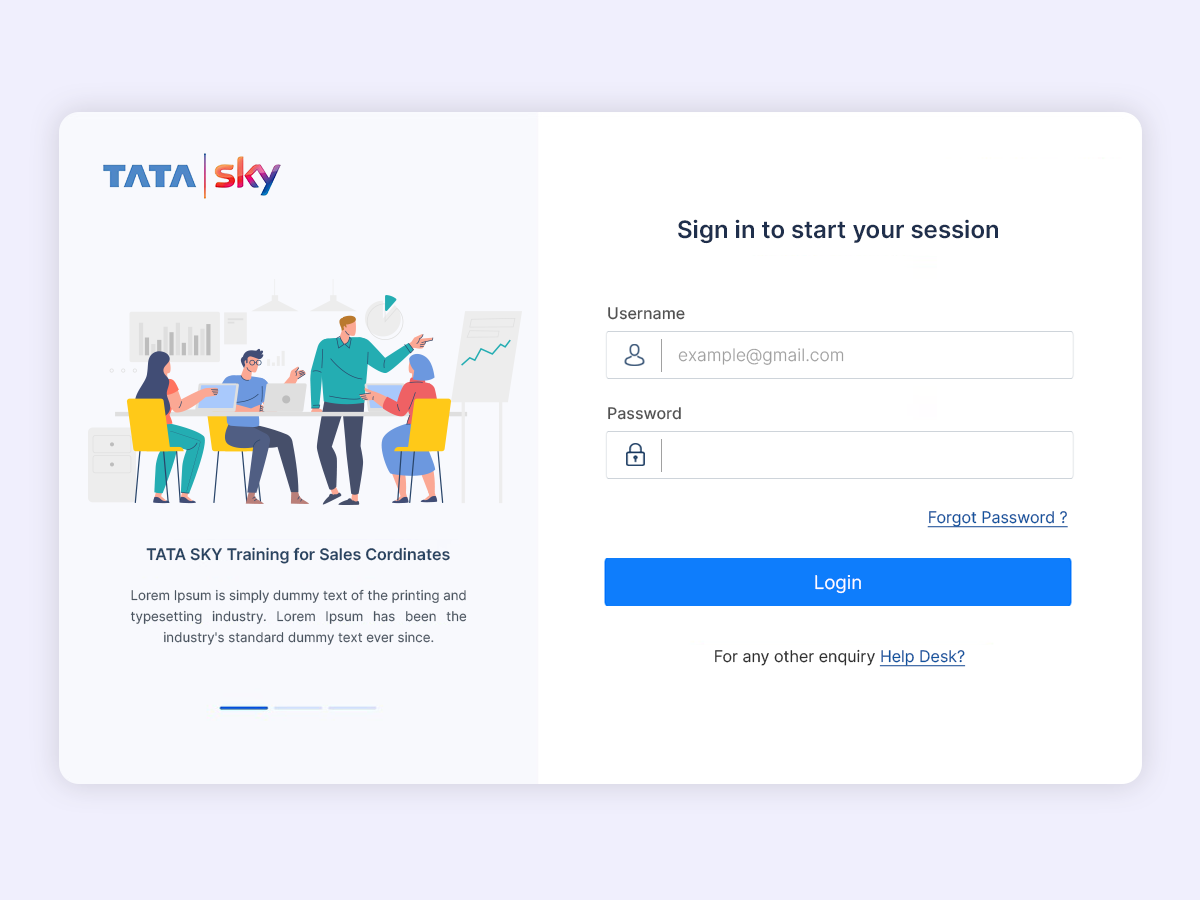
<style>
.page{position:relative;width:1200px;height:900px;background:#ffffff}
.page>*{position:absolute;margin:0}
.t1{font:24px "Inter-SemiBold";color:#1f2f4c}
.t2{font:16px "Inter-Medium";color:#525252}
.t3{font:17.3px "Inter-Light";color:#a0a0a0}
.t4{font:16px "Inter-Regular";color:#11539e;text-decoration:underline}
.t5{font:16px "Inter-SemiBold";color:#294461}
.t6{font:18.7px "Inter-Regular";color:#fefeff}
.t7{font:13.3px/21.3px "Inter-Regular";color:#495460}
.t8{font:16px "Inter-Regular";color:#2e2e2e}
</style>
<div class="page">
<p class="t1" style="left:678px;top:219px;width:320px;height:25px">Sign in to start your session</p>
<p class="t2" style="left:608px;top:307px;width:77px;height:13px">Username</p>
<p class="t3" style="left:678px;top:348px;width:166px;height:17px">example@gmail.com</p>
<p class="t2" style="left:608px;top:407px;width:73px;height:13px">Password</p>
<p class="t4" style="left:927px;top:511px;width:141px;height:17px">Forgot Password ?</p>
<p class="t5" style="left:146px;top:547px;width:304px;height:17px">TATA SKY Training for Sales Cordinates</p>
<p class="t6" style="left:815px;top:575px;width:46px;height:19px">Login</p>
<p class="t7" style="left:130px;top:589px;width:337px;height:56px;text-align:justify">Lorem Ipsum is simply dummy text of the printing and typesetting industry. Lorem Ipsum has been the industry's standard dummy text ever since.</p>
<p class="t8" style="left:715px;top:649px;width:251px;height:18px">For any other enquiry <span class="t4">Help Desk?</span></p>
</div>
